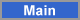
<style>
.page{position:relative;width:80px;height:20px;background:#3366cc}
.page>*{position:absolute;margin:0}
.t1{font:14px "Arial-BoldMT";color:#ffffff}
</style>
<div class="page">
<p class="t1" style="left:24px;top:5px;width:31px;height:11px">Main</p>
</div>
